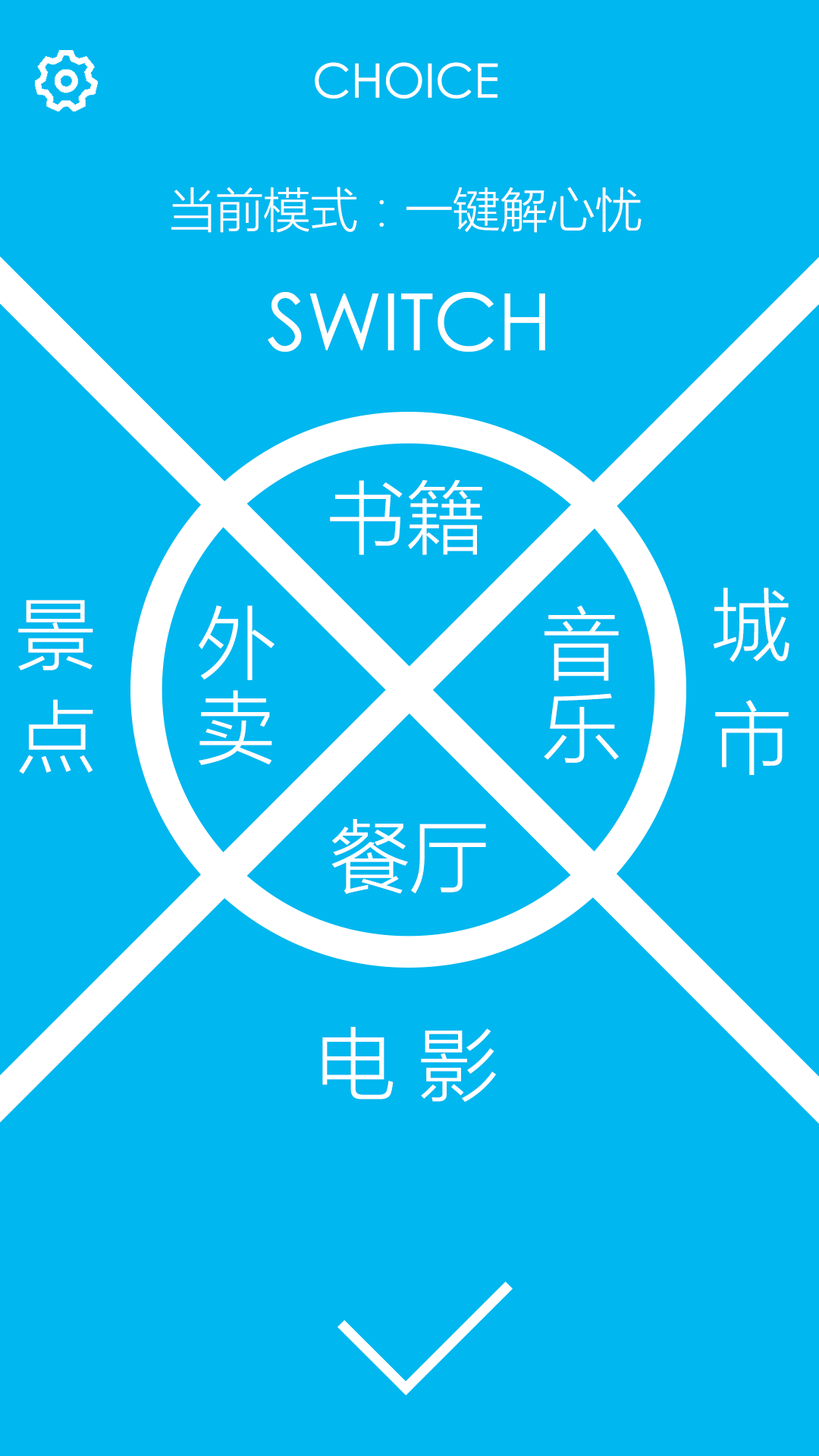
<style>
.page{position:relative;width:819px;height:1456px;background:#00b7ef}
.page>*{position:absolute;margin:0}
.t1{font:47.4px "CenturyGothic";color:#ffffff}
.t2{font:47.4px "MicrosoftYaHeiUILight";color:#ffffff}
.t3{font:79px "CenturyGothic";color:#ffffff}
.t4{font:79px "MicrosoftYaHeiUILight";color:#ffffff}
</style>
<div class="page">
<p class="t1" style="left:315px;top:62px;width:183px;height:37px">CHOICE</p>
<p class="t2" style="left:171px;top:187px;width:471px;height:46px">当前模式：一键解心忧</p>
<p class="t3" style="left:268px;top:292px;width:277px;height:60px">SWITCH</p>
<p class="t4" style="left:330px;top:479px;width:152px;height:76px">书籍</p>
<p class="t4" style="left:714px;top:588px;width:75px;height:74px">城</p>
<p class="t4" style="left:18px;top:600px;width:75px;height:70px">景</p>
<p class="t4" style="left:199px;top:605px;width:76px;height:75px">外</p>
<p class="t4" style="left:544px;top:605px;width:75px;height:76px">音</p>
<p class="t4" style="left:19px;top:699px;width:74px;height:75px">点</p>
<p class="t4" style="left:199px;top:690px;width:73px;height:75px">卖</p>
<p class="t4" style="left:544px;top:693px;width:75px;height:70px">乐</p>
<p class="t4" style="left:715px;top:700px;width:74px;height:75px">市</p>
<p class="t4" style="left:331px;top:819px;width:155px;height:75px">餐厅</p>
<p class="t4" style="left:322px;top:1027px;width:174px;height:75px">电 影</p>
</div>
